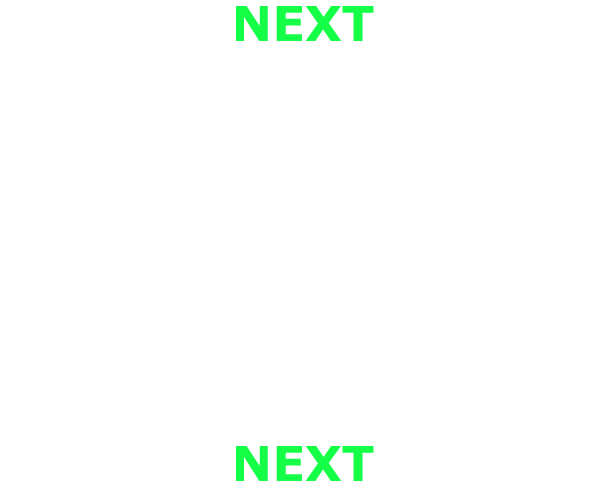
<style>
.page{position:relative;width:608px;height:490px;background:#ffffff}
.page>*{position:absolute;margin:0}
.t1{font:48px "Verdana-Bold";color:#15ff47}
</style>
<div class="page">
<p class="t1" style="left:236px;top:6px;width:138px;height:35px">NEXT</p>
<p class="t1" style="left:236px;top:446px;width:138px;height:35px">NEXT</p>
</div>
